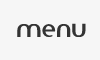
<style>
.page{position:relative;width:100px;height:60px;background:#f6f6f6}
.page>*{position:absolute;margin:0}
.t1{font:26px "AmerikaSans";color:#333333}
</style>
<div class="page">
<p class="t1" style="left:17px;top:23px;width:69px;height:14px">menu</p>
</div>
